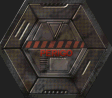
<style>
.page{position:relative;width:112px;height:98px;background:#212121}
.page>*{position:absolute;margin:0}
.t1{font:8.9px "Arial-BoldMT";letter-spacing:-0.04em;color:#8e2315;font-weight:bold}
</style>
<div class="page">
<p class="t1" style="left:40px;top:49px;width:33px;height:8px">PERIGO</p>
</div>
